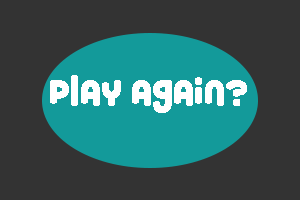
<style>
.page{position:relative;width:300px;height:200px;background:#333333}
.page>*{position:absolute;margin:0}
.t1{font:37.5px "RoundyRainbows";color:#ffffff}
</style>
<div class="page">
<p class="t1" style="left:50px;top:75px;width:197px;height:38px">Play again?</p>
</div>
